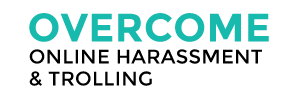
<style>
.page{position:relative;width:300px;height:98px;background:#ffffff}
.page>*{position:absolute;margin:0}
.t1{font:19.8px/22px "Montserrat-Regular";letter-spacing:0.01em;color:#000000}
.t2{font:39.7px/26.5px "Montserrat-Bold";letter-spacing:0.01em;color:#17baad}
</style>
<div class="page">
<p class="t1" style="left:29px;top:13px;width:240px;height:73px"><span class="t2">OVERCOME<br></span>ONLINE HARASSMENT<br>&amp; TROLLING</p>
</div>
